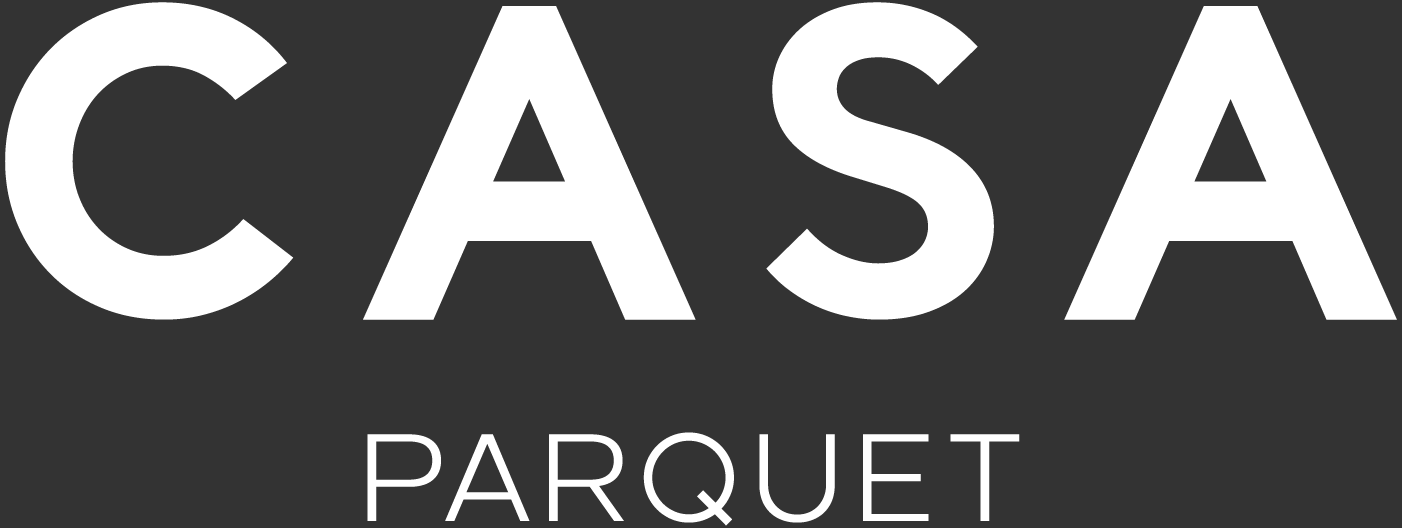
<style>
.page{position:relative;width:1402px;height:528px;background:#333333}
.page>*{position:absolute;margin:0}
.t1{font:417.7px "Santral-Bold";letter-spacing:0.13em;color:#ffffff}
.t2{font:391.9px "FONTSPRINGDEMO-AdequateBold";letter-spacing:0.13em;color:#ffffff}
.t3{font:123.6px "REBELTON-Normal";letter-spacing:0.1em;color:#ffffff}
</style>
<div class="page">
<p class="t1" style="left:5px;top:2px;width:289px;height:318px">C</p>
<p class="t2" style="left:363px;top:6px;width:333px;height:314px">A</p>
<p class="t1" style="left:766px;top:2px;width:228px;height:318px">S</p>
<p class="t2" style="left:1064px;top:6px;width:333px;height:314px">A</p>
<p class="t3" style="left:367px;top:432px;width:653px;height:94px">PARQUET</p>
</div>
